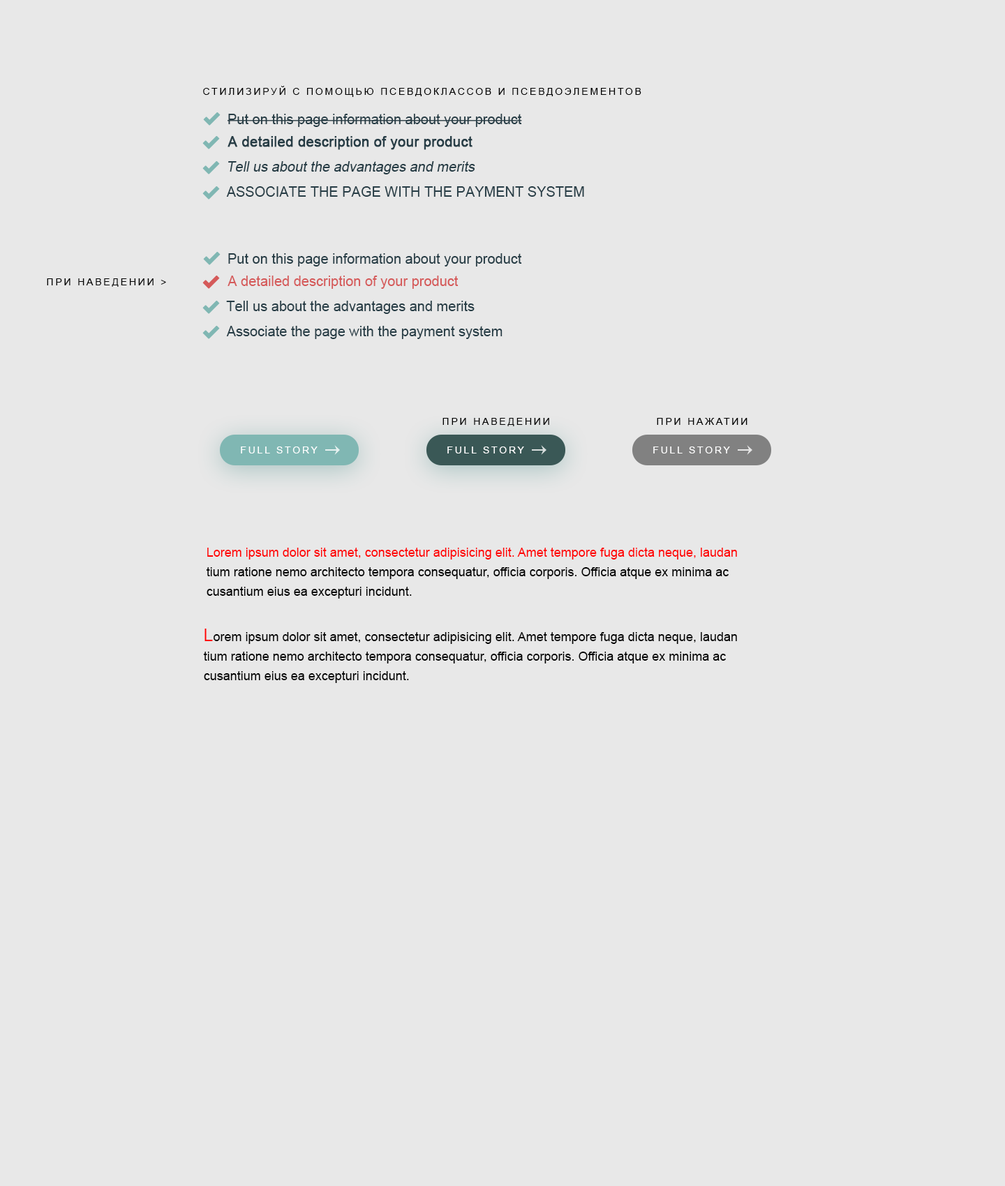
<style>
.page{position:relative;width:1005px;height:1186px;background:#e8e8e8}
.page>*{position:absolute;margin:0}
.t1{font:9.8px "ArialMT";letter-spacing:0.2em;color:#000000;text-transform:uppercase}
.t2{font:14px "ArialMT";color:#273d46}
.t3{font:14px "ArialMT";color:#273d46;font-weight:bold}
.t4{font:14px "ArialMT";color:#273d46;font-style:italic}
.t5{font:14px "ArialMT";color:#273d46;text-transform:uppercase}
.t6{font:14px "ArialMT";color:#d55a5a}
.t7{font:9.8px "ArialMT";letter-spacing:0.2em;color:#ffffff;text-transform:uppercase}
.t8{font:12.6px/19.5px "ArialMT";color:#000000}
.t9{font:12.6px/19.5px "ArialMT";color:#ff0000}
.t10{font:17.4px/19.5px "ArialMT";color:#ff0000}
</style>
<div class="page">
<p class="t1" style="left:203px;top:86px;width:438px;height:11px">Стилизируй с помощью псевдоклассов и псевдоэлементов</p>
<p class="t2" style="left:228px;top:114px;width:294px;height:13px">Put on this page information about your product</p>
<p class="t3" style="left:228px;top:136px;width:244px;height:14px">A detailed description of your product</p>
<p class="t4" style="left:228px;top:161px;width:247px;height:13px">Tell us about the advantages and merits</p>
<p class="t5" style="left:226px;top:186px;width:358px;height:11px">Associate the page with the payment system</p>
<p class="t2" style="left:228px;top:253px;width:294px;height:14px">Put on this page information about your product</p>
<p class="t1" style="left:47px;top:278px;width:119px;height:9px">При наведении &gt;</p>
<p class="t6" style="left:228px;top:276px;width:231px;height:13px">A detailed description of your product</p>
<p class="t2" style="left:226px;top:301px;width:249px;height:13px">Tell us about the advantages and merits</p>
<p class="t2" style="left:226px;top:326px;width:277px;height:13px">Associate the page with the payment system</p>
<p class="t1" style="left:442px;top:418px;width:107px;height:8px">При наведении</p>
<p class="t1" style="left:657px;top:418px;width:90px;height:7px">При нажатии</p>
<p class="t7" style="left:241px;top:447px;width:77px;height:7px">Full Story</p>
<p class="t7" style="left:447px;top:447px;width:77px;height:7px">Full Story</p>
<p class="t7" style="left:653px;top:447px;width:77px;height:7px">Full Story</p>
<p class="t8" style="left:206px;top:548px;width:531px;height:51px;text-align:right"><span class="t9">Lorem ipsum dolor sit amet, consectetur adipisicing elit. Amet tempore fuga dicta neque, laudan<br></span>tium ratione nemo architecto tempora consequatur, officia corporis. Officia atque ex minima ac<br>cusantium eius ea excepturi incidunt.</p>
<p class="t8" style="left:203px;top:629px;width:534px;height:54px;text-align:right"><span class="t10">L</span>orem ipsum dolor sit amet, consectetur adipisicing elit. Amet tempore fuga dicta neque, laudan<br>tium ratione nemo architecto tempora consequatur, officia corporis. Officia atque ex minima ac<br>cusantium eius ea excepturi incidunt.</p>
</div>
